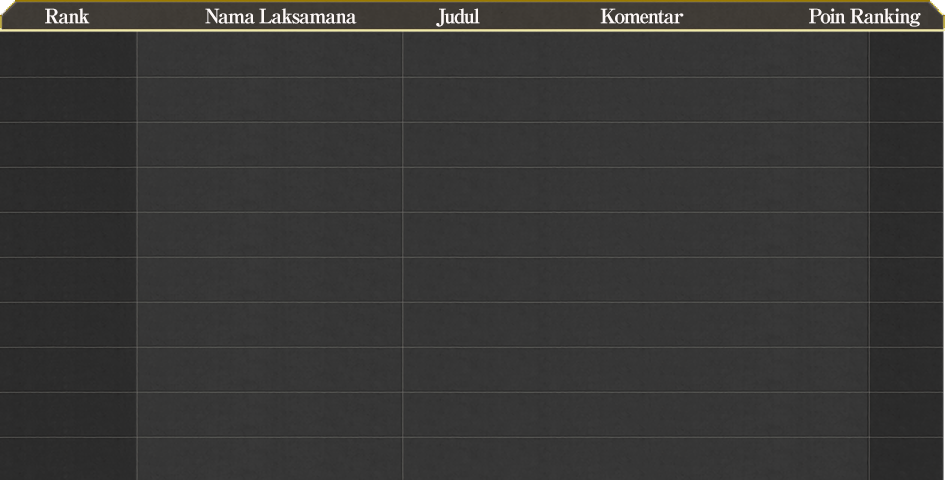
<style>
.page{position:relative;width:945px;height:480px;background:#363636}
.page>*{position:absolute;margin:0}
.t1{font:20px "RyuminPro-ExBold";letter-spacing:-0.08em;color:#fef9f8}
</style>
<div class="page">
<p class="t1" style="left:45px;top:8px;width:876px;height:19px">Rank                       Nama Laksamana                Judul                        Komentar                         Poin Ranking</p>
</div>
